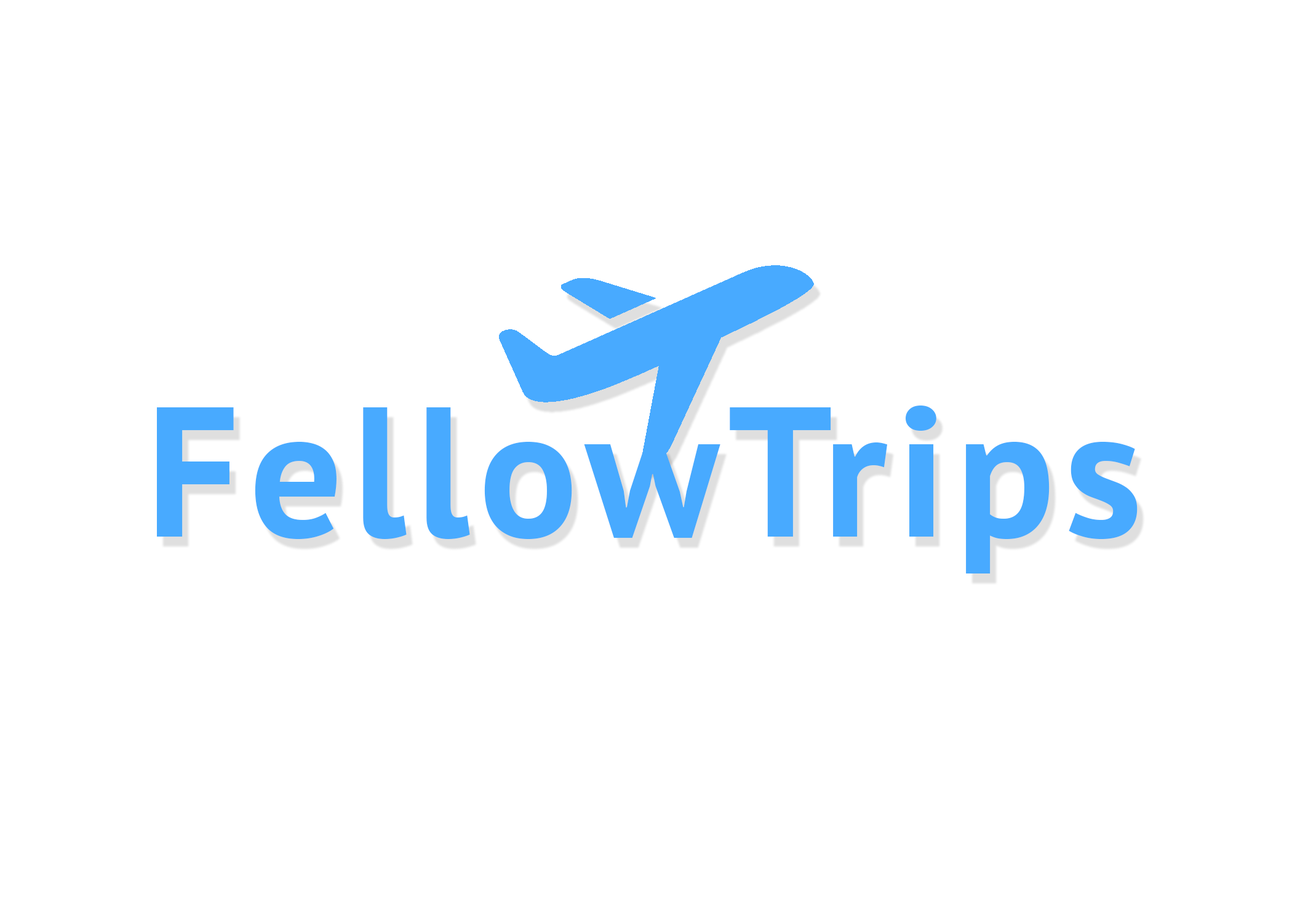
<style>
.page{position:relative;width:1292px;height:923px;background:#ffffff}
.page>*{position:absolute;margin:0}
.t1{font:184.6px "PTSans-Bold";letter-spacing:0.05em;color:#48aaff}
</style>
<div class="page">
<p class="t1" style="left:157px;top:405px;width:981px;height:168px">FellowTrips</p>
</div>
